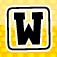
<style>
.page{position:relative;width:57px;height:57px;background:#000000}
.page>*{position:absolute;margin:0}
.t1{font:36px "babybloc";color:#000000}
</style>
<div class="page">
<p class="t1" style="left:6px;top:6px;width:45px;height:45px;rotate:-1deg">W</p>
</div>
